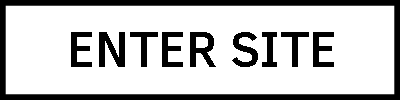
<style>
.page{position:relative;width:400px;height:100px;background:#ffffff}
.page>*{position:absolute;margin:0}
.t1{font:50px "ClearSans-Medium";color:#000000}
</style>
<div class="page">
<p class="t1" style="left:71px;top:32px;width:263px;height:35px">ENTER SITE</p>
</div>
